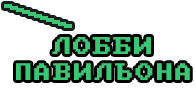
<style>
.page{position:relative;width:196px;height:92px;background:#ffffff}
.page>*{position:absolute;margin:0}
.t1{font:19.5px "PxPlus_IBM_BIOS";letter-spacing:0.075em;color:#39c773}
.t2{font:19.3px "PxPlus_IBM_BIOS";letter-spacing:0.075em;color:#39c773}
</style>
<div class="page">
<p class="t1" style="left:52px;top:37px;width:99px;height:17px">ЛОББИ</p>
<p class="t2" style="left:16px;top:63px;width:174px;height:17px">ПАВИЛЬОНА</p>
</div>
